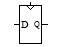
<style>
.page{position:relative;width:60px;height:47px;background:#ffffff}
.page>*{position:absolute;margin:0}
.t1{font:10px "TimesNewRomanPSMT";color:#000000;font-variant:small-caps}
.t2{font:8px "TimesNewRomanPSMT";color:#000000;font-variant:small-caps}
</style>
<div class="page">
<p class="t1" style="left:21px;top:21px;width:8px;height:7px">D</p>
<p class="t2" style="left:34px;top:21px;width:6px;height:8px">Q</p>
</div>
